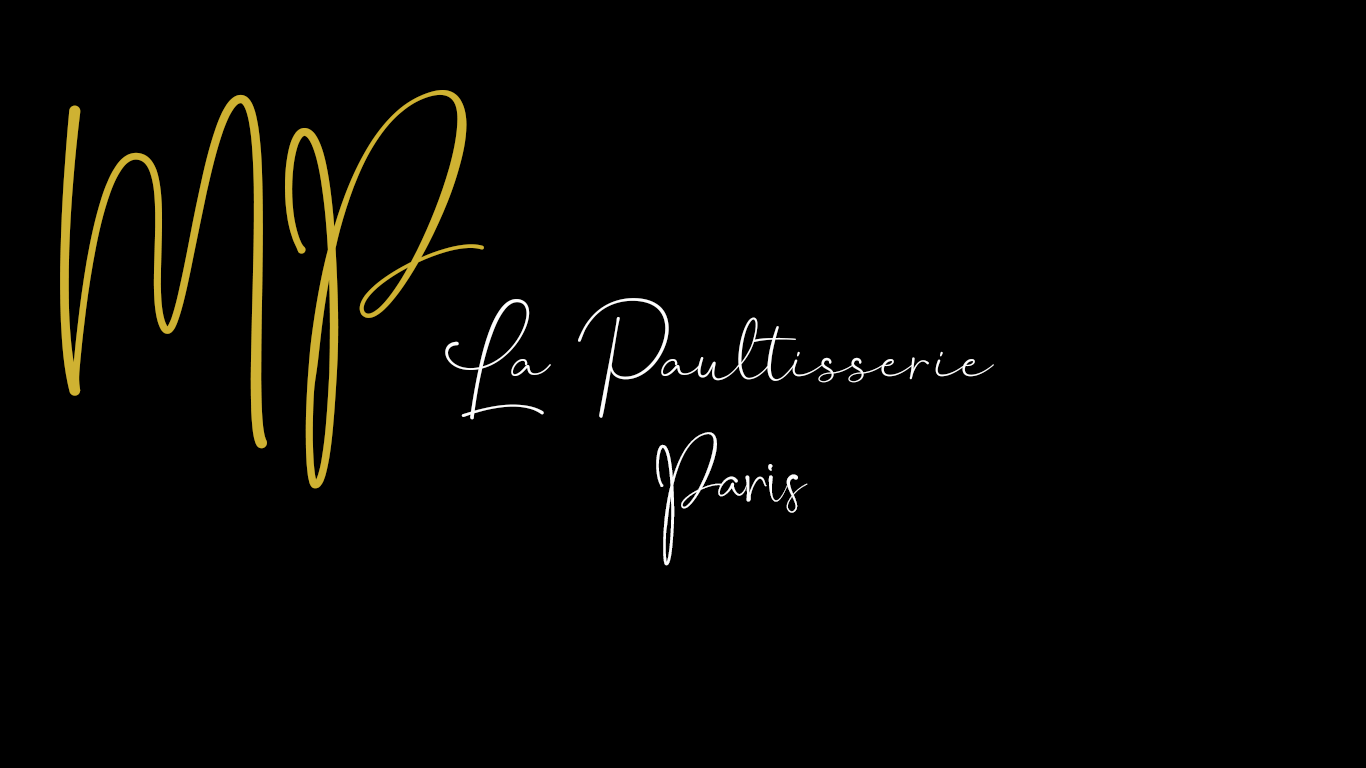
<style>
.page{position:relative;width:1366px;height:768px;background:#000000}
.page>*{position:absolute;margin:0}
.t1{font:150px "Belleson_";color:#cfb232}
.t2{font:150px "HanstonDemo-Regular";color:#fdfdfd}
.t3{font:150px "HanstonDemo-Regular";color:#ffd700}
.t4{font:50px "Belleson_";color:#fdfdfd}
</style>
<div class="page">
<p class="t1" style="left:60px;top:90px;width:424px;height:399px;text-align:center">MP</p>
<p class="t2" style="left:445px;top:298px;width:549px;height:268px;text-align:center"><span class="t3"><br></span>La Paultisserie<br><span class="t4"><br>Paris</span></p>
</div>
